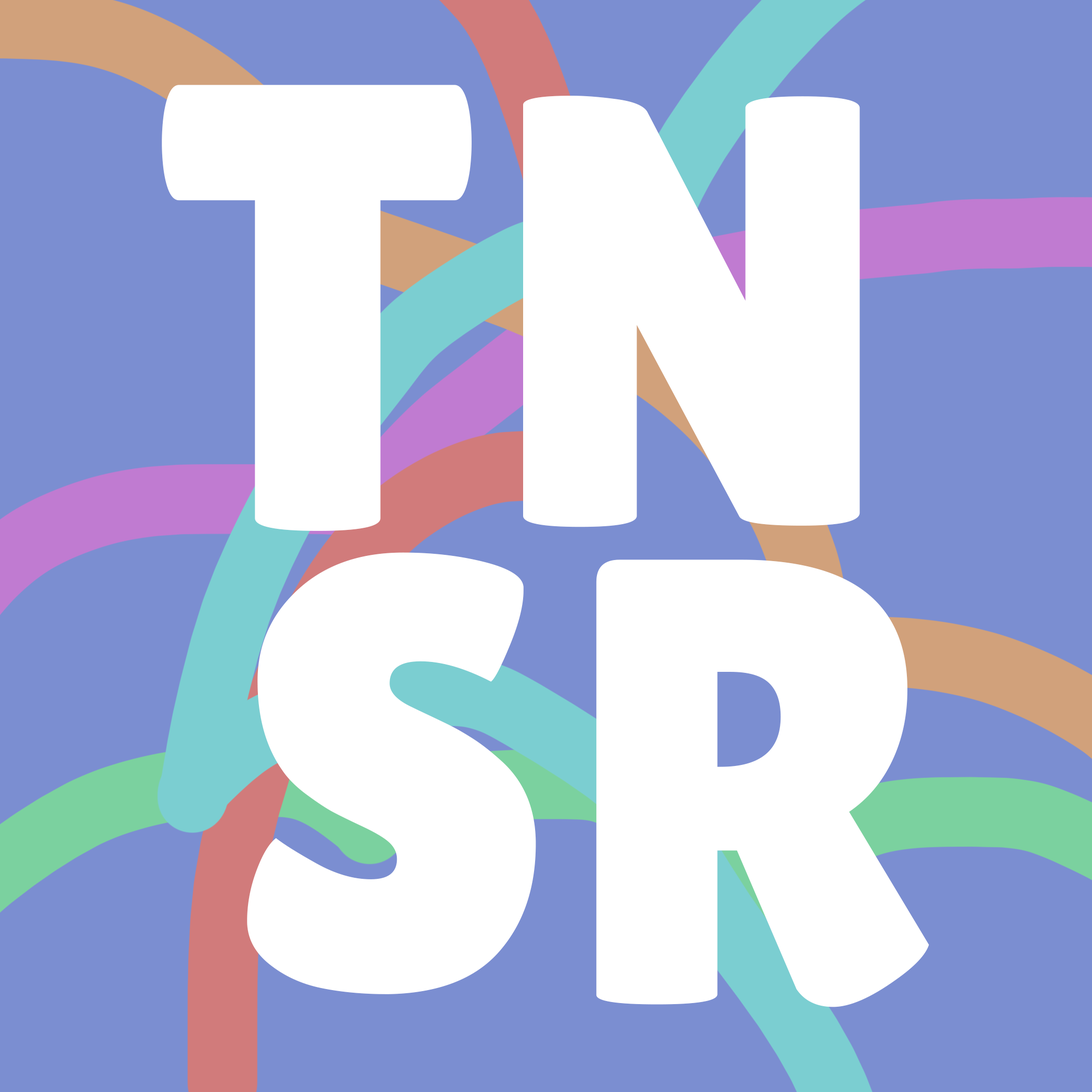
<style>
.page{position:relative;width:1092px;height:1092px;background:#7b8ed1}
.page>*{position:absolute;margin:0}
.t1{font:633.6px "LilitaOne";color:#ffffff}
.t2{font:614.1px "LilitaOne";color:#ffffff}
</style>
<div class="page">
<p class="t1" style="left:162px;top:85px;width:310px;height:446px">T</p>
<p class="t2" style="left:523px;top:96px;width:337px;height:431px">N</p>
<p class="t2" style="left:247px;top:552px;width:289px;height:442px">S</p>
<p class="t1" style="left:596px;top:560px;width:333px;height:447px">R</p>
</div>
